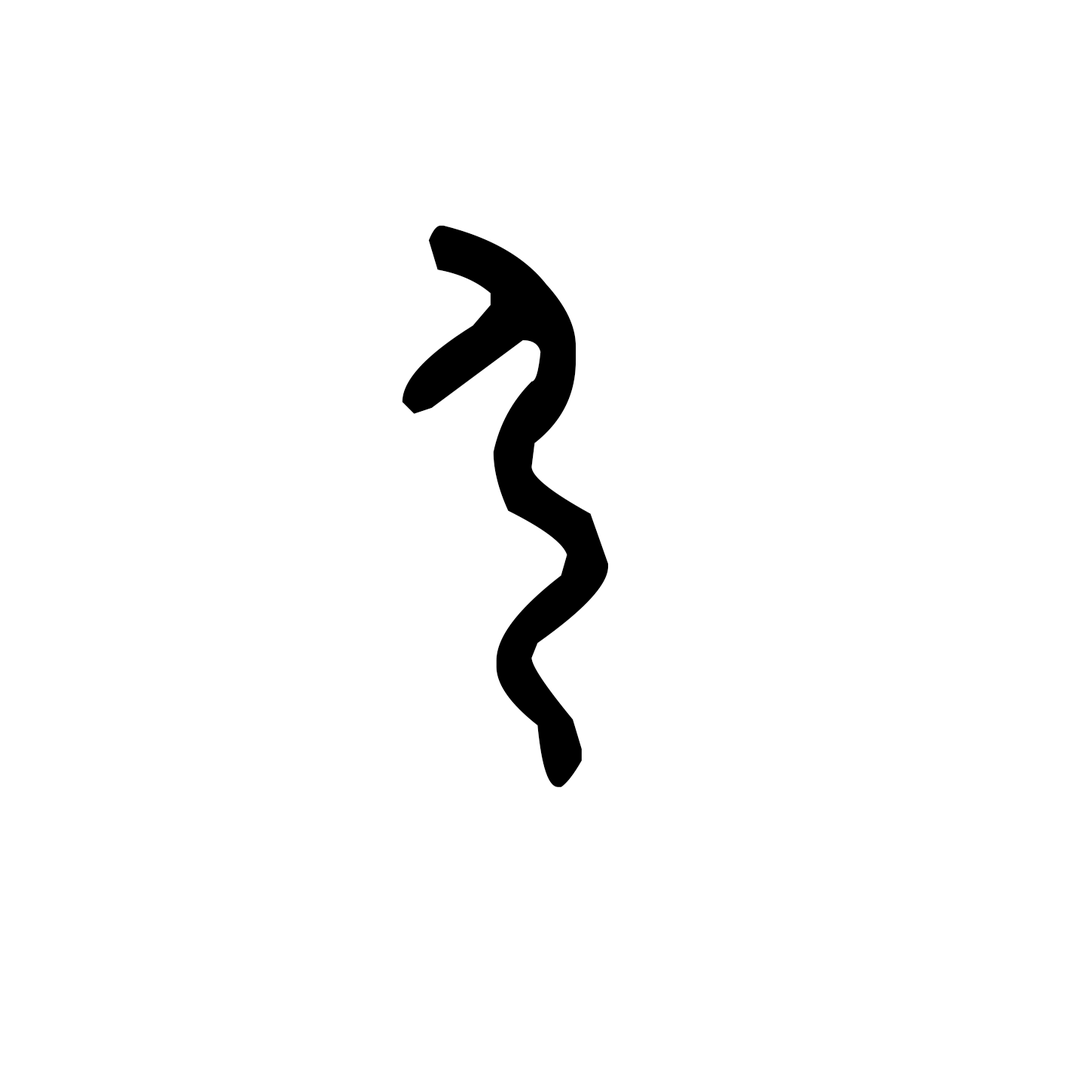
<style>
.page{position:relative;width:1092px;height:1092px;background:#ffffff}
.page>*{position:absolute;margin:0}
.t1{font:752.6px "½ðÎÄ´ó×­Ìå";color:#000000}
</style>
<div class="page">
<p class="t1" style="left:402px;top:225px;width:207px;height:562px">弓</p>
</div>
